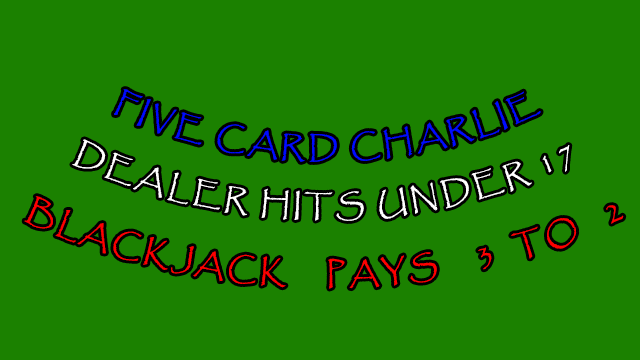
<style>
.page{position:relative;width:640px;height:360px;background:#1b8100}
.page>*{position:absolute;margin:0}
.t1{font:30px "Papyrus-Regular";letter-spacing:0.075em;color:#000cff;font-weight:bold;scale:0.94 1}
.t2{font:30px "Papyrus-Regular";letter-spacing:0.075em;color:#ffffff;font-weight:bold;scale:0.94 1}
.t3{font:30px "Papyrus-Regular";letter-spacing:0.075em;color:#ff0000;font-weight:bold;scale:0.94 1}
</style>
<div class="page">
<p class="t1" style="left:114px;top:89px;width:427px;height:73px;text-align:center">FIVE CARD CHARLIE</p>
<p class="t2" style="left:72px;top:139px;width:498px;height:82px;text-align:center">DEALER HITS UNDER 17</p>
<p class="t3" style="left:24px;top:196px;width:600px;height:93px;text-align:center">BLACKJACK    PAYS    3  TO   2</p>
</div>
